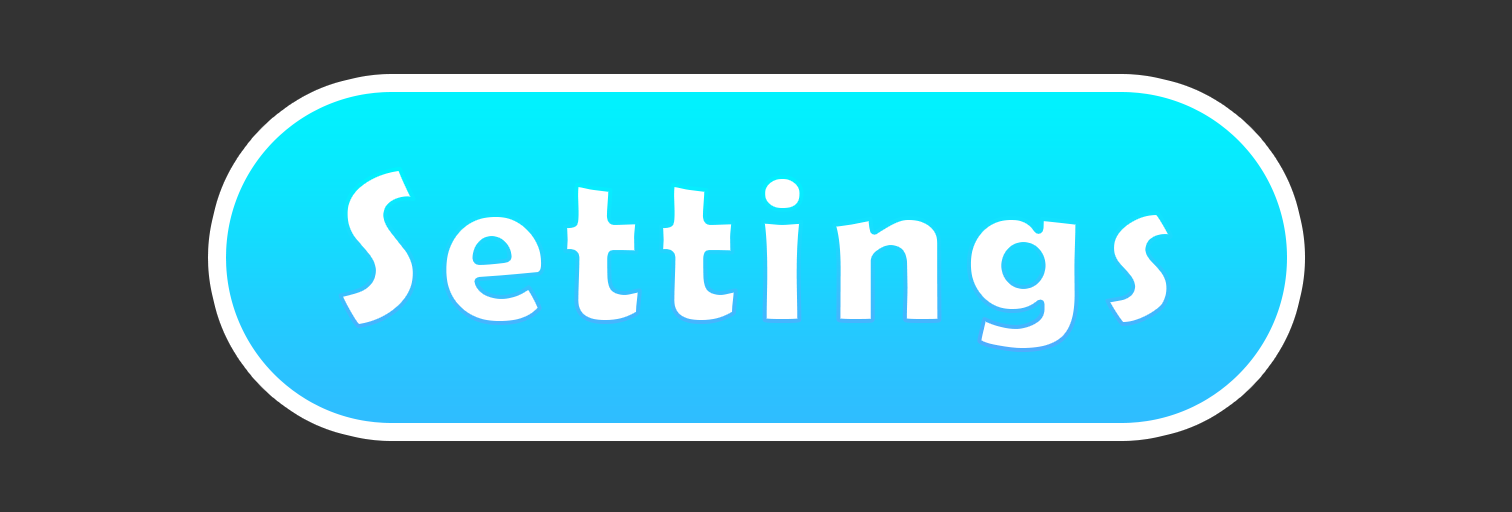
<style>
.page{position:relative;width:1512px;height:512px;background:#333333}
.page>*{position:absolute;margin:0}
.t1{font:218.9px "BerlinSansFBDemi-Bold";letter-spacing:0.06em;color:#ffffff}
</style>
<div class="page">
<p class="t1" style="left:338px;top:167px;width:835px;height:185px">Settings</p>
</div>
